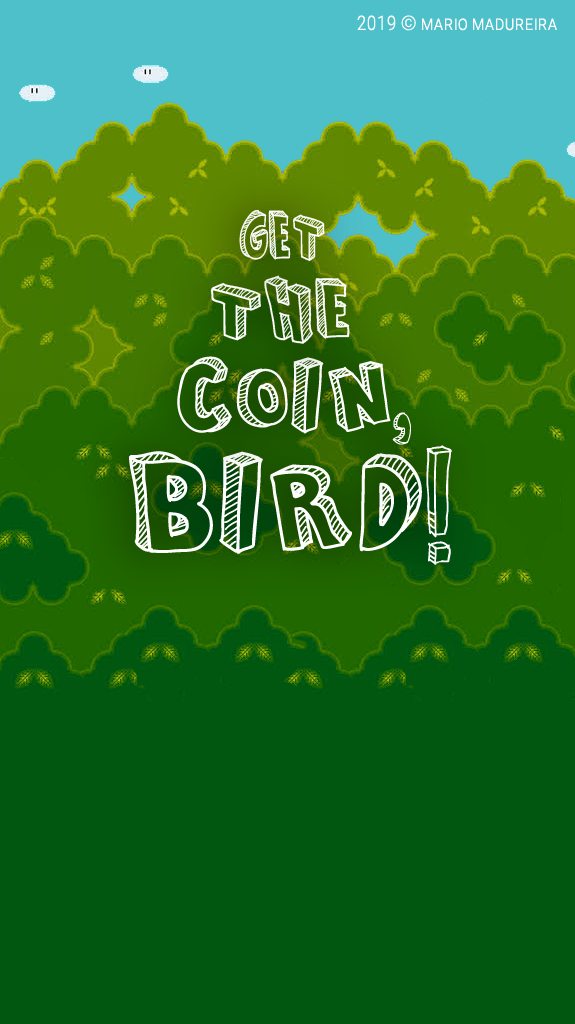
<style>
.page{position:relative;width:575px;height:1024px;background:#015710}
.page>*{position:absolute;margin:0}
.t1{font:20px "RobotoCondensed-Light";color:#ffffff;font-variant:small-caps}
.t2{font:68.5px "FromCartoonBlocks";color:#ffffff;scale:0.77 1}
.t3{font:84.7px "FromCartoonBlocks";color:#ffffff}
.t4{font:103.8px "FromCartoonBlocks";color:#ffffff}
.t5{font:140.4px "FromCartoonBlocks";color:#ffffff}
</style>
<div class="page">
<p class="t1" style="left:357px;top:15px;width:200px;height:16px">2019 © mario madureira</p>
<p class="t2" style="left:239px;top:210px;width:86px;height:51px">GET</p>
<p class="t3" style="left:210px;top:275px;width:140px;height:69px">THE</p>
<p class="t4" style="left:177px;top:356px;width:234px;height:89px">COIN,</p>
<p class="t5" style="left:129px;top:445px;width:323px;height:120px">BIRD!</p>
</div>
